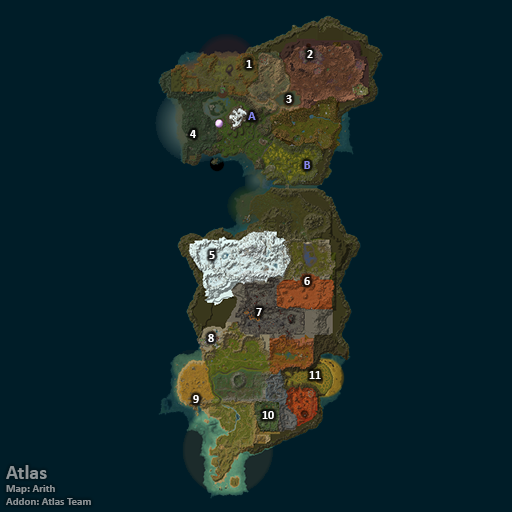
<style>
.page{position:relative;width:512px;height:512px;background:#001d28}
.page>*{position:absolute;margin:0}
.t1{font:12px "Calibri-Bold";color:#ffffff}
.t2{font:12px "Calibri-Bold";color:#8788ee}
.t3{font:11px "Calibri-Bold";color:#8d9396}
.t4{font:20px "Calibri-Bold";color:#8d9396}
</style>
<div class="page">
<p class="t1" style="left:307px;top:50px;width:6px;height:8px">2</p>
<p class="t1" style="left:246px;top:60px;width:6px;height:8px">1</p>
<p class="t1" style="left:286px;top:95px;width:6px;height:8px">3</p>
<p class="t2" style="left:248px;top:112px;width:8px;height:8px">A</p>
<p class="t1" style="left:190px;top:130px;width:6px;height:8px">4</p>
<p class="t2" style="left:304px;top:161px;width:7px;height:8px">B</p>
<p class="t1" style="left:209px;top:251px;width:6px;height:8px">5</p>
<p class="t1" style="left:304px;top:277px;width:6px;height:8px">6</p>
<p class="t1" style="left:256px;top:308px;width:6px;height:8px">7</p>
<p class="t1" style="left:208px;top:334px;width:6px;height:8px">8</p>
<p class="t1" style="left:309px;top:371px;width:12px;height:8px">11</p>
<p class="t1" style="left:193px;top:395px;width:6px;height:8px">9</p>
<p class="t1" style="left:262px;top:411px;width:12px;height:8px">10</p>
<p class="t3" style="left:6px;top:465px;width:85px;height:40px"><span class="t4">Atlas<br></span>Map: Arith<br>Addon: Atlas Team</p>
</div>
